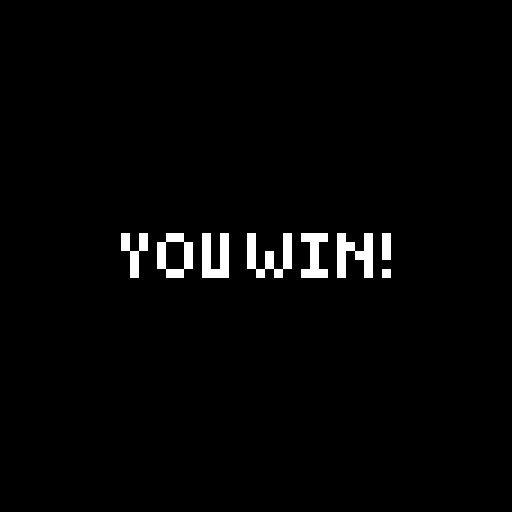
<style>
.page{position:relative;width:512px;height:512px;background:#000000}
.page>*{position:absolute;margin:0}
.t1{font:72px "Pixelated";color:#ffffff}
</style>
<div class="page">
<p class="t1" style="left:121px;top:233px;width:270px;height:45px">YOU WIN!</p>
</div>
